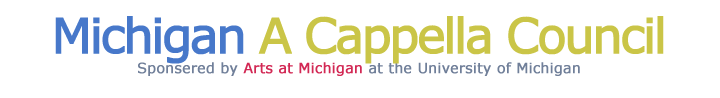
<style>
.page{position:relative;width:720px;height:98px;background:#ffffff}
.page>*{position:absolute;margin:0}
.t1{font:48px "Verdana";letter-spacing:-0.075em;color:#cac547;font-weight:bold}
.t2{font:48px "Verdana";letter-spacing:-0.075em;color:#4778ca;font-weight:bold}
.t3{font:14px "Verdana";color:#707f99;font-weight:bold}
.t4{font:14px "Verdana";color:#d22854;font-weight:bold}
</style>
<div class="page">
<p class="t1" style="left:55px;top:16px;width:609px;height:48px"><span class="t2">Michigan</span> A Cappella Council</p>
<p class="t3" style="left:138px;top:62px;width:442px;height:14px">Sponsered by <span class="t4">Arts at Michigan </span>at the University of Michigan</p>
</div>
